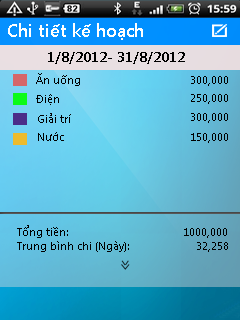
<style>
.page{position:relative;width:240px;height:320px}
.page>*{position:absolute;margin:0}
.t1{font:18.3px "SegoeUI-SemiBold";color:#ffffff}
.t2{font:13.8px "SegoeUI-SemiBold";color:#000000}
.t3{font:11.5px "SegoeUI";color:#000000}
</style>
<div class="page">
<p class="t1" style="left:8px;top:23px;width:135px;height:17px">Chi tiết kế hoạch</p>
<p class="t2" style="left:48px;top:52px;width:137px;height:12px">1/8/2012- 31/8/2012</p>
<p class="t3" style="left:36px;top:73px;width:44px;height:13px">Ăn uống</p>
<p class="t3" style="left:191px;top:76px;width:37px;height:10px">300,000</p>
<p class="t3" style="left:36px;top:94px;width:23px;height:11px">Điện</p>
<p class="t3" style="left:191px;top:94px;width:37px;height:10px">250,000</p>
<p class="t3" style="left:38px;top:113px;width:33px;height:10px">Giải trí</p>
<p class="t3" style="left:191px;top:113px;width:37px;height:10px">300,000</p>
<p class="t3" style="left:38px;top:132px;width:26px;height:9px">Nước</p>
<p class="t3" style="left:191px;top:133px;width:37px;height:10px">150,000</p>
<p class="t3" style="left:17px;top:225px;width:211px;height:27px">Tổng tiền:                                      1000,000<br>Trung bình chi (Ngày):                      32,258</p>
</div>
